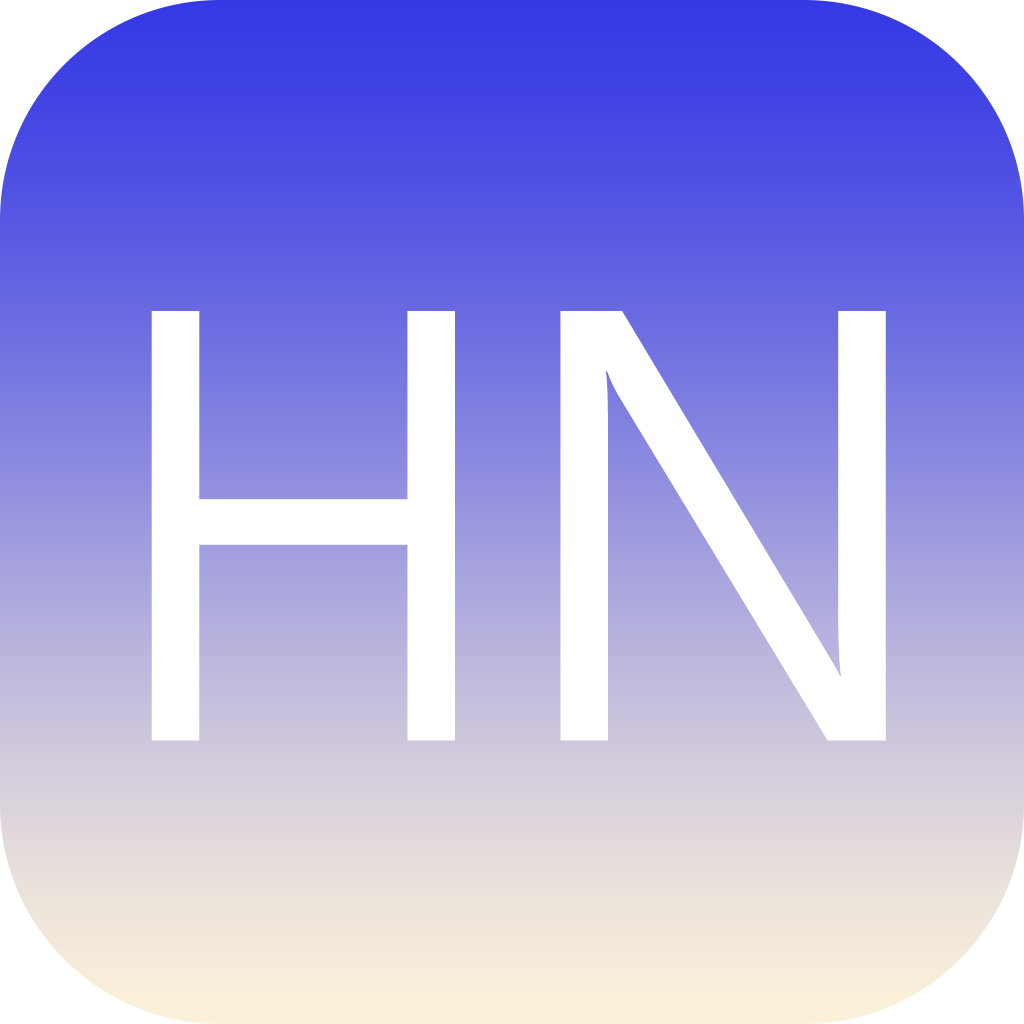
<style>
.page{position:relative;width:1024px;height:1024px}
.page>*{position:absolute;margin:0}
.t1{font:613px "MicrosoftTaiLe";color:#ffffff;scale:0.94 1}
</style>
<div class="page">
<p class="t1" style="left:151px;top:311px;width:735px;height:430px">HN</p>
</div>
